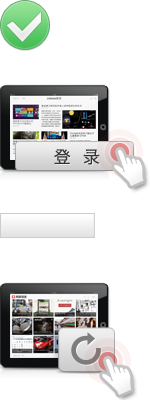
<style>
.page{position:relative;width:150px;height:400px;background:#ffffff}
.page>*{position:absolute;margin:0}
.t1{font:17px "HiraginoSansGB-W3";letter-spacing:0.02em;color:#333333}
</style>
<div class="page">
<p class="t1" style="left:54px;top:149px;width:46px;height:16px">登  录</p>
</div>
